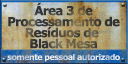
<style>
.page{position:relative;width:128px;height:64px}
.page>*{position:absolute;margin:0}
.t1{font:12.4px/11px "Verdana-Bold";letter-spacing:-0.06em}
.t2{font:8px "Verdana-Bold";letter-spacing:-0.06em;color:#ececec}
</style>
<div class="page">
<p class="t1" style="left:8px;top:2px;width:112px;height:47px;text-align:center">Área 3 de<br>Processamento de<br>Resíduos de <br>Black Mesa</p>
<p class="t2" style="left:7px;top:54px;width:113px;height:8px">somente pessoal autorizado</p>
</div>
